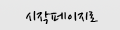
<style>
.page{position:relative;width:120px;height:30px;background:#e7e7e7}
.page>*{position:absolute;margin:0}
.t1{font:20px "NanumPen";color:#000000}
</style>
<div class="page">
<p class="t1" style="left:26px;top:11px;width:72px;height:13px">시작페이지로</p>
</div>
